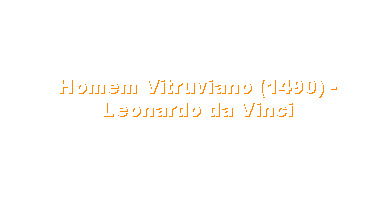
<style>
.page{position:relative;width:391px;height:200px;background:#ffffff}
.page>*{position:absolute;margin:0}
.t1{font:19px "Arial-Black";color:#ffffff}
</style>
<div class="page">
<p class="t1" style="left:60px;top:80px;width:277px;height:37px;text-align:center">Homem Vitruviano (1490) - Leonardo da Vinci</p>
</div>
